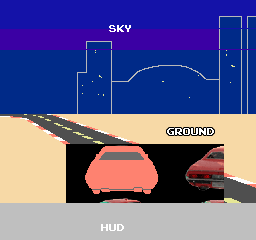
<style>
.page{position:relative;width:256px;height:240px;background:#002a88}
.page>*{position:absolute;margin:0}
.t1{font:10px "PixelNES";color:#ffffff}
</style>
<div class="page">
<p class="t1" style="left:109px;top:25px;width:22px;height:7px">sky</p>
<p class="t1" style="left:167px;top:128px;width:47px;height:7px">Ground</p>
<p class="t1" style="left:101px;top:224px;width:23px;height:7px">hud</p>
</div>
